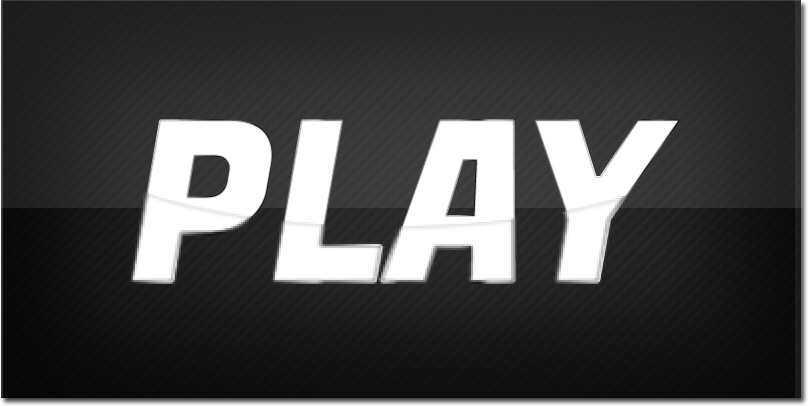
<style>
.page{position:relative;width:808px;height:406px}
.page>*{position:absolute;margin:0}
.t1{font:222.7px "FugazOne-Regular";color:#ffffff}
</style>
<div class="page">
<p class="t1" style="left:132px;top:120px;width:547px;height:162px">PLAY</p>
</div>
